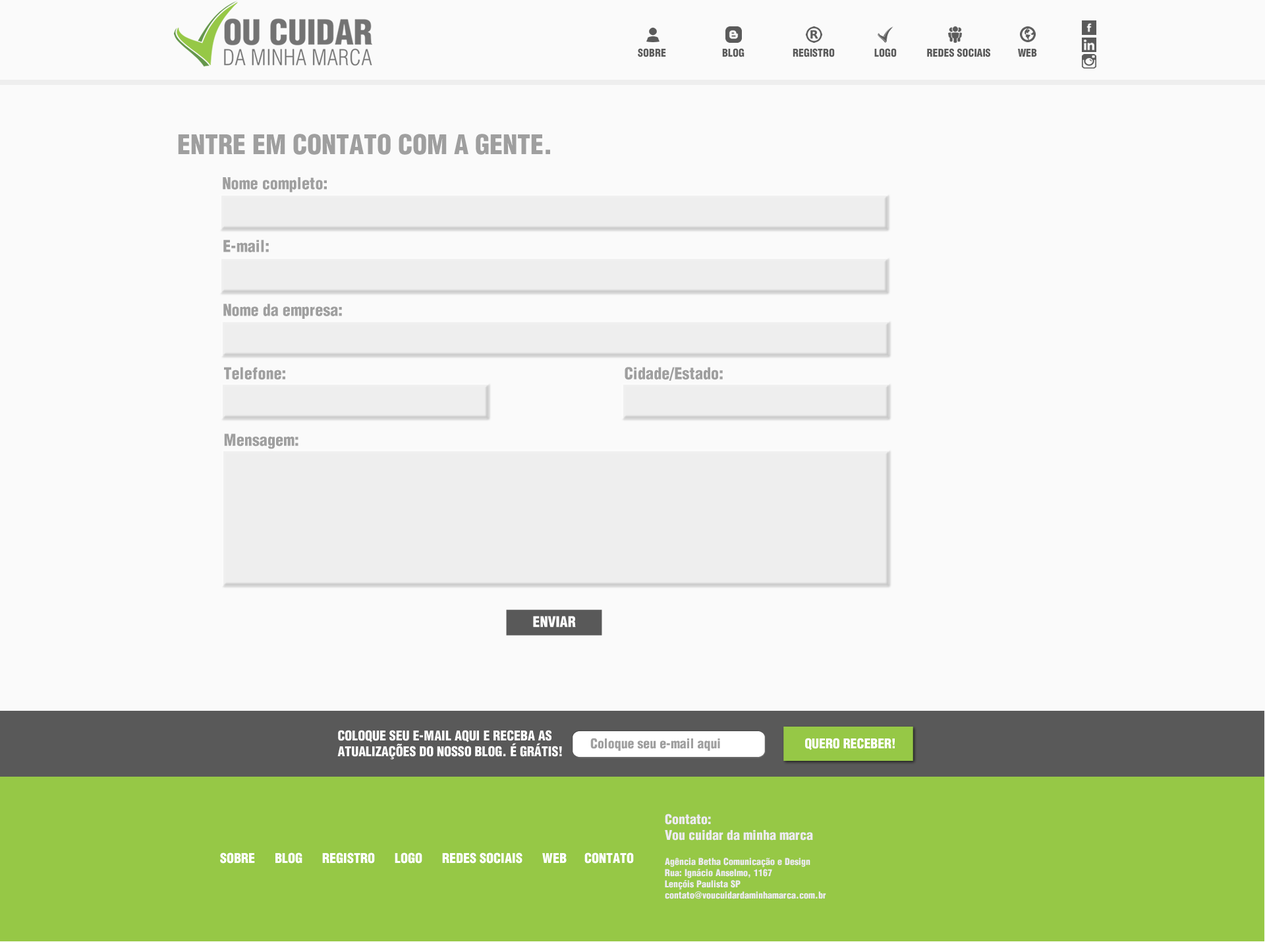
<style>
.page{position:relative;width:1265px;height:942px;background:#fafafa}
.page>*{position:absolute;margin:0}
.t1{font:10.5px "Helvetica-CondensedBlack";color:#5a5a5a}
.t2{font:10.5px "Helvetica-CondensedBlack";color:#595959}
.t3{font:26.4px "Helvetica-CondensedBlack";color:#9f9f9f}
.t4{font:16px "Helvetica-CondensedBlack";color:#9f9f9f}
.t5{font:14.4px "Helvetica-CondensedBlack";color:#ffffff}
.t6{font:9.2px/11.1px "Helvetica-CondensedBlack";color:#edebf0}
.t7{font:13.2px/15.8px "Helvetica-CondensedBlack";color:#edebf0}
.t8{font:13.2px "Helvetica-CondensedBlack";color:#ffffff}
</style>
<div class="page">
<p class="t1" style="left:638px;top:48px;width:28px;height:9px">SOBRE</p>
<p class="t2" style="left:722px;top:48px;width:23px;height:9px">BLOG</p>
<p class="t1" style="left:793px;top:48px;width:42px;height:9px">REGISTRO</p>
<p class="t1" style="left:875px;top:48px;width:22px;height:9px">LOGO</p>
<p class="t1" style="left:927px;top:48px;width:64px;height:9px">REDES SOCIAIS</p>
<p class="t1" style="left:1018px;top:49px;width:19px;height:8px">WEB</p>
<p class="t3" style="left:178px;top:134px;width:372px;height:21px">ENTRE EM CONTATO COM A GENTE.</p>
<p class="t4" style="left:223px;top:177px;width:104px;height:15px">Nome completo:</p>
<p class="t4" style="left:223px;top:240px;width:46px;height:12px">E-mail:</p>
<p class="t4" style="left:223px;top:304px;width:119px;height:15px">Nome da empresa:</p>
<p class="t4" style="left:224px;top:367px;width:61px;height:13px">Telefone:</p>
<p class="t4" style="left:625px;top:367px;width:98px;height:14px">Cidade/Estado:</p>
<p class="t4" style="left:224px;top:434px;width:75px;height:15px">Mensagem:</p>
<p class="t5" style="left:533px;top:616px;width:43px;height:11px">ENVIAR</p>
<p class="t6" style="left:665px;top:814px;width:161px;height:86px"><span class="t7">Contato:<br>Vou cuidar da minha marca<br><br></span>Agência Betha Comunicação e Design<br>Rua: Ignácio Anselmo, 1167<br>Lençóis Paulista SP<br>contato@voucuidardaminhamarca.com.br</p>
<p class="t8" style="left:220px;top:853px;width:35px;height:11px">SOBRE</p>
<p class="t8" style="left:275px;top:853px;width:27px;height:11px">BLOG</p>
<p class="t8" style="left:322px;top:853px;width:53px;height:11px">REGISTRO</p>
<p class="t8" style="left:395px;top:853px;width:27px;height:11px">LOGO</p>
<p class="t8" style="left:442px;top:853px;width:81px;height:11px">REDES SOCIAIS</p>
<p class="t8" style="left:542px;top:853px;width:25px;height:10px">WEB</p>
<p class="t8" style="left:585px;top:853px;width:49px;height:11px">CONTATO</p>
</div>
